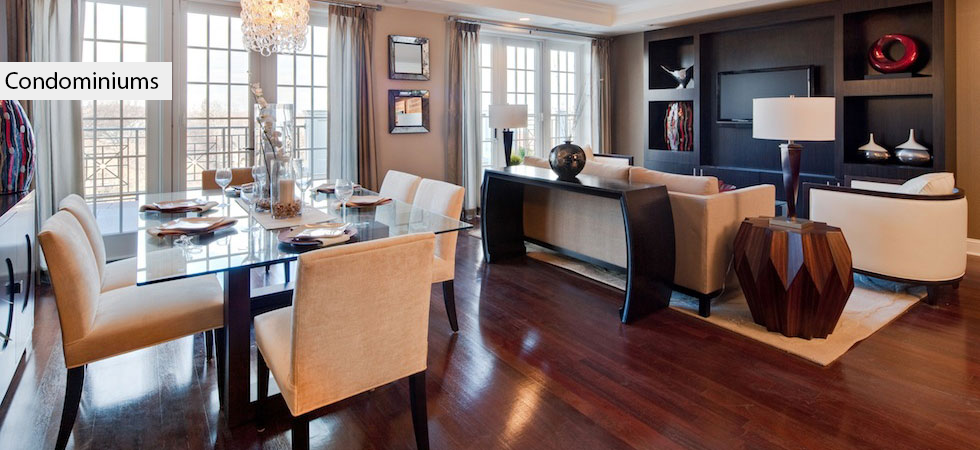
<style>
.page{position:relative;width:980px;height:450px}
.page>*{position:absolute;margin:0}
.t1{font:24px "MyriadPro-Regular";color:#000000}
</style>
<div class="page">
<p class="t1" style="left:5px;top:72px;width:154px;height:17px">Condominiums</p>
</div>
